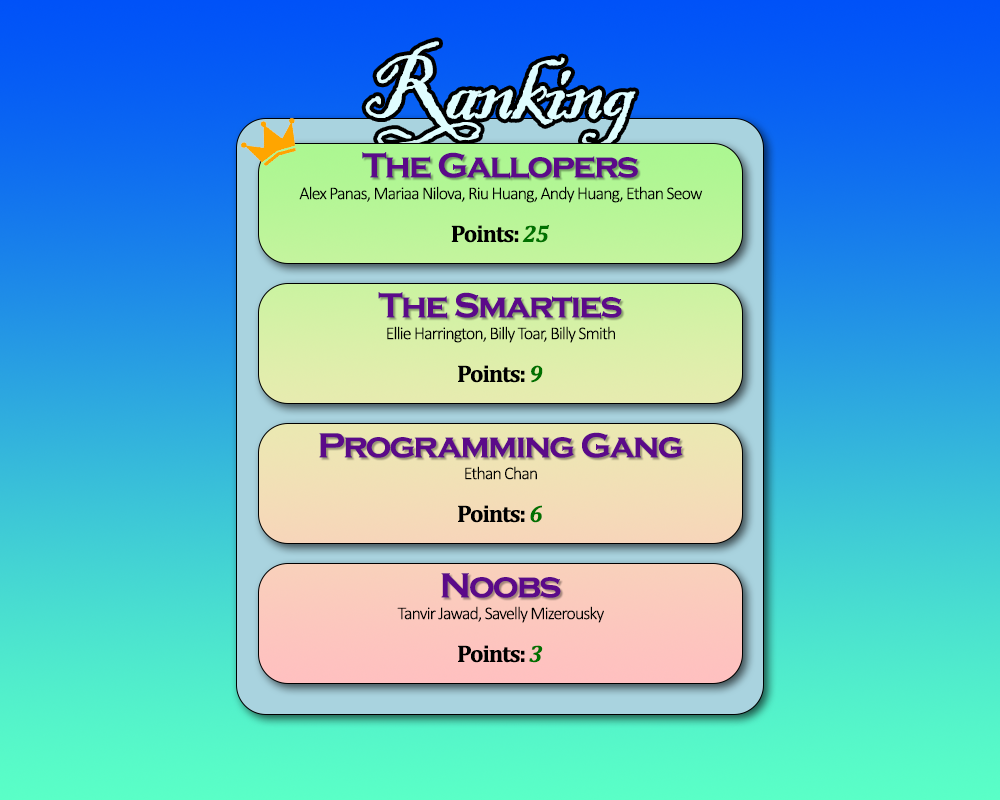
<style>
.page{position:relative;width:1000px;height:800px}
.page>*{position:absolute;margin:0}
.t1{font:36px "CopperplateGothic-Bold";letter-spacing:-0.05em;color:#5b0a89}
.t2{font:18px "Calibri-Light";letter-spacing:-0.05em;color:#000000}
.t3{font:24px "Cambria-Bold";letter-spacing:-0.05em;color:#000000}
.t4{font:24px "Cambria-BoldItalic";letter-spacing:-0.05em;color:#007100}
</style>
<div class="page">
<p class="t1" style="left:362px;top:152px;width:276px;height:27px">The Gallopers</p>
<p class="t2" style="left:299px;top:186px;width:404px;height:17px">Alex Panas, Mariaa Nilova, Riu Huang, Andy Huang, Ethan Seow</p>
<p class="t3" style="left:451px;top:225px;width:99px;height:18px">Points: <span class="t4">25</span></p>
<p class="t1" style="left:378px;top:292px;width:244px;height:27px">The Smarties</p>
<p class="t2" style="left:387px;top:326px;width:228px;height:17px">Ellie Harrington, Billy Toar, Billy Smith</p>
<p class="t3" style="left:458px;top:365px;width:85px;height:18px">Points: <span class="t4">9</span></p>
<p class="t1" style="left:319px;top:432px;width:364px;height:26px">Programming Gang</p>
<p class="t2" style="left:465px;top:466px;width:72px;height:14px">Ethan Chan</p>
<p class="t3" style="left:458px;top:505px;width:84px;height:18px">Points: <span class="t4">6</span></p>
<p class="t1" style="left:441px;top:573px;width:120px;height:25px">Noobs</p>
<p class="t2" style="left:397px;top:606px;width:207px;height:17px">Tanvir Jawad, Savelly Mizerousky</p>
<p class="t3" style="left:458px;top:645px;width:85px;height:18px">Points: <span class="t4">3</span></p>
</div>
